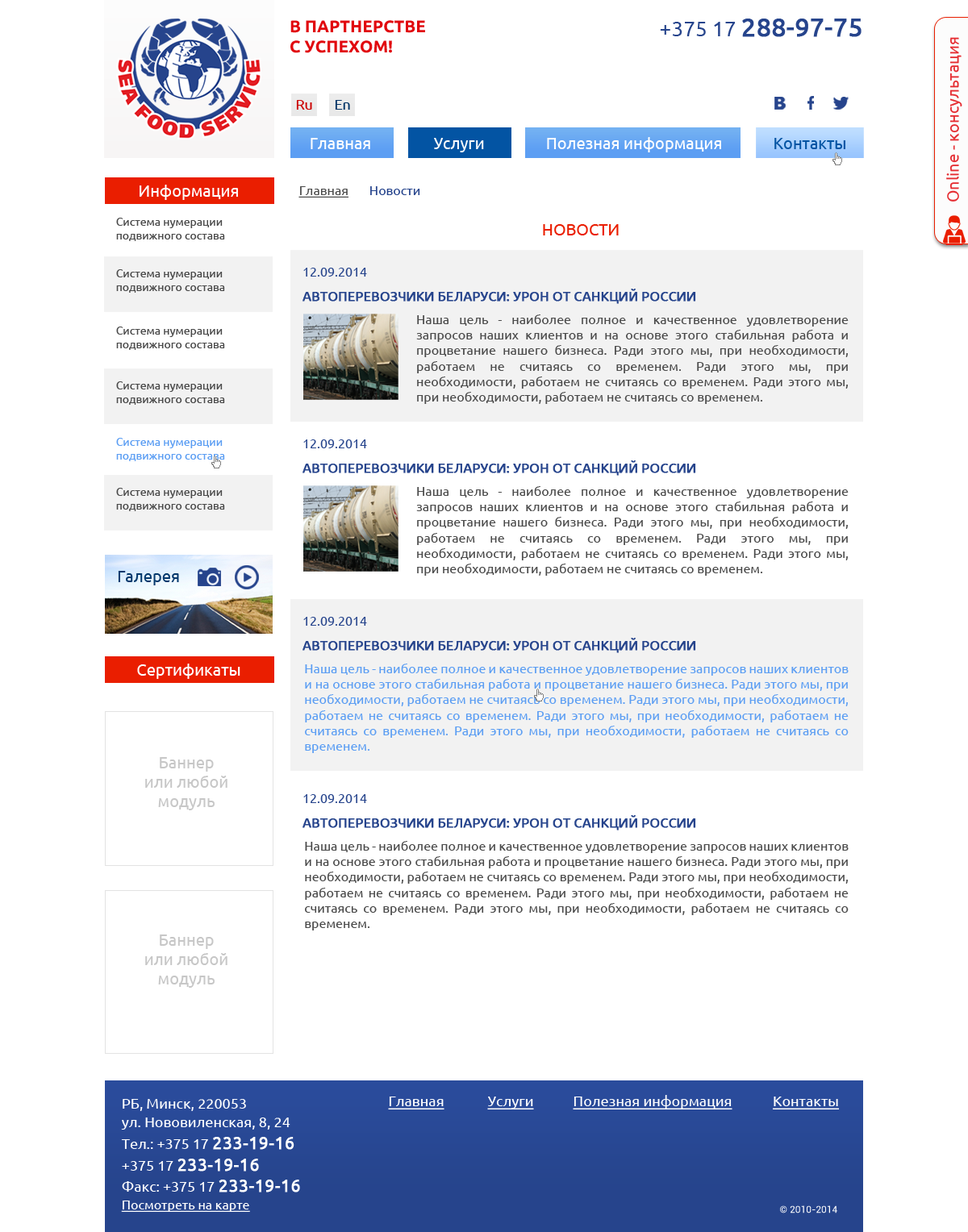
<style>
.page{position:relative;width:968px;height:1232px;background:#ffffff}
.page>*{position:absolute;margin:0}
.t1{font:16.7px "Ubuntu-Bold";color:#e1080e;text-transform:uppercase}
.t2{font:25.4px "Ubuntu";color:#26448c;font-weight:bold}
.t3{font:21.2px "Ubuntu";color:#26448c}
.t4{font:16.1px "Ubuntu";color:#e52b30}
.t5{font:14.1px "Ubuntu";color:#cc0000}
.t6{font:14.1px "Ubuntu";color:#003366}
.t7{font:16.1px "Ubuntu";color:#ffffff}
.t8{font:16.1px "Ubuntu";color:#0354a3}
.t9{font:12.9px "Ubuntu";color:#4a4a4a;text-decoration:underline}
.t10{font:12.9px "Ubuntu";color:#26448c}
.t11{font:11.3px "Ubuntu";color:#4a4a4a}
.t12{font:16.1px "Ubuntu";color:#ea1e00;text-transform:uppercase}
.t13{font:12.9px "Ubuntu";color:#26448c;text-transform:uppercase;font-weight:bold}
.t14{font:12.9px "Ubuntu";color:#4a4a4a}
.t15{font:11.3px "Ubuntu";color:#5c9ef3}
.t16{font:16.1px "Ubuntu";color:#03386c}
.t17{font:12.9px "Ubuntu";color:#5c9ef3}
.t18{font:16.1px "Ubuntu";color:#c7c7c7}
.t19{font:14.5px "Ubuntu";color:#ffffff;text-decoration:underline}
.t20{font:14.5px "Ubuntu";color:#ffffff}
.t21{font:14.4px "Ubuntu";color:#ffffff}
.t22{font:17.3px "Ubuntu";color:#ffffff;font-weight:bold}
.t23{font:12.9px "Ubuntu";color:#ffffff;text-decoration:underline}
.t24{font:9.7px "Roboto-Regular";color:#ffffff}
</style>
<div class="page">
<p class="t1" style="left:290px;top:20px;width:135px;height:33px">В партнерстве<br>с успехом!</p>
<p class="t2" style="left:660px;top:19px;width:201px;height:18px"><span class="t3">+375 17 </span>288-97-75</p>
<p class="t4" style="left:946px;top:37px;width:16px;height:165px;rotate:-90deg">Online - консультация</p>
<p class="t5" style="left:296px;top:100px;width:16px;height:10px">Ru</p>
<p class="t6" style="left:335px;top:100px;width:15px;height:10px">En</p>
<p class="t7" style="left:310px;top:138px;width:60px;height:11px">Главная</p>
<p class="t7" style="left:434px;top:138px;width:50px;height:14px">Услуги</p>
<p class="t7" style="left:547px;top:137px;width:174px;height:15px">Полезная информация</p>
<p class="t8" style="left:774px;top:138px;width:71px;height:11px">Контакты</p>
<p class="t7" style="left:140px;top:185px;width:98px;height:15px">Информация</p>
<p class="t9" style="left:298px;top:186px;width:122px;height:12px">Главная       <span class="t10">Новости</span></p>
<p class="t11" style="left:116px;top:218px;width:109px;height:23px">Система нумерации подвижного состава</p>
<p class="t12" style="left:543px;top:224px;width:76px;height:11px">Новости</p>
<p class="t11" style="left:116px;top:269px;width:109px;height:24px">Система нумерации подвижного состава</p>
<p class="t10" style="left:303px;top:268px;width:64px;height:9px">12.09.2014</p>
<p class="t13" style="left:302px;top:289px;width:394px;height:15px">Автоперевозчики Беларуси: урон от санкций России</p>
<p class="t14" style="left:416px;top:315px;width:432px;height:89px;text-align:justify">Наша цель - наиболее полное и качественное удовлетворение запросов наших клиентов и на основе этого стабильная работа и процветание нашего бизнеса. Ради этого мы, при необходимости, работаем не считаясь со временем. Ради этого мы, при необходимости, работаем не считаясь со временем. Ради этого мы, при необходимости, работаем не считаясь со временем.</p>
<p class="t11" style="left:116px;top:327px;width:109px;height:23px">Система нумерации подвижного состава</p>
<p class="t11" style="left:116px;top:381px;width:109px;height:24px">Система нумерации подвижного состава</p>
<p class="t15" style="left:116px;top:438px;width:109px;height:23px">Система нумерации подвижного состава</p>
<p class="t10" style="left:303px;top:440px;width:64px;height:8px">12.09.2014</p>
<p class="t13" style="left:302px;top:460px;width:394px;height:16px">Автоперевозчики Беларуси: урон от санкций России</p>
<p class="t11" style="left:116px;top:488px;width:109px;height:23px">Система нумерации подвижного состава</p>
<p class="t14" style="left:416px;top:486px;width:432px;height:90px;text-align:justify">Наша цель - наиболее полное и качественное удовлетворение запросов наших клиентов и на основе этого стабильная работа и процветание нашего бизнеса. Ради этого мы, при необходимости, работаем не считаясь со временем. Ради этого мы, при необходимости, работаем не считаясь со временем. Ради этого мы, при необходимости, работаем не считаясь со временем.</p>
<p class="t16" style="left:118px;top:571px;width:61px;height:14px">Галерея</p>
<p class="t10" style="left:303px;top:617px;width:64px;height:9px">12.09.2014</p>
<p class="t13" style="left:302px;top:638px;width:394px;height:15px">Автоперевозчики Беларуси: урон от санкций России</p>
<p class="t7" style="left:137px;top:664px;width:103px;height:15px">Сертификаты</p>
<p class="t17" style="left:305px;top:664px;width:543px;height:89px;text-align:justify">Наша цель - наиболее полное и качественное удовлетворение запросов наших клиентов и на основе этого стабильная работа и процветание нашего бизнеса. Ради этого мы, при необходимости, работаем не считаясь со временем. Ради этого мы, при необходимости, работаем не считаясь со временем. Ради этого мы, при необходимости, работаем не считаясь со временем. Ради этого мы, при необходимости, работаем не считаясь со временем.</p>
<p class="t18" style="left:145px;top:757px;width:82px;height:53px;text-align:center">Баннер<br>или любой<br>модуль</p>
<p class="t10" style="left:303px;top:794px;width:64px;height:9px">12.09.2014</p>
<p class="t13" style="left:302px;top:815px;width:394px;height:16px">Автоперевозчики Беларуси: урон от санкций России</p>
<p class="t14" style="left:305px;top:841px;width:543px;height:90px;text-align:justify">Наша цель - наиболее полное и качественное удовлетворение запросов наших клиентов и на основе этого стабильная работа и процветание нашего бизнеса. Ради этого мы, при необходимости, работаем не считаясь со временем. Ради этого мы, при необходимости, работаем не считаясь со временем. Ради этого мы, при необходимости, работаем не считаясь со временем. Ради этого мы, при необходимости, работаем не считаясь со временем.</p>
<p class="t18" style="left:145px;top:935px;width:82px;height:53px;text-align:center">Баннер<br>или любой<br>модуль</p>
<p class="t19" style="left:388px;top:1097px;width:56px;height:13px">Главная</p>
<p class="t19" style="left:487px;top:1097px;width:47px;height:13px">Услуги</p>
<p class="t19" style="left:573px;top:1095px;width:159px;height:15px">Полезная информация</p>
<p class="t19" style="left:773px;top:1097px;width:66px;height:13px">Контакты</p>
<p class="t20" style="left:123px;top:1099px;width:123px;height:12px">РБ, Минск, 220053</p>
<p class="t20" style="left:121px;top:1118px;width:169px;height:12px">ул. Нововиленская, 8, 24</p>
<p class="t21" style="left:121px;top:1137px;width:173px;height:13px">Тел.: +375 17 <span class="t22">233-19-16</span></p>
<p class="t22" style="left:122px;top:1159px;width:137px;height:13px"><span class="t21">+375 17 </span>233-19-16</p>
<p class="t21" style="left:122px;top:1180px;width:178px;height:13px">Факс: +375 17 <span class="t22">233-19-16</span></p>
<p class="t23" style="left:121px;top:1201px;width:129px;height:11px">Посмотреть на карте</p>
<p class="t24" style="left:780px;top:1206px;width:57px;height:8px">© 2010-2014</p>
</div>
